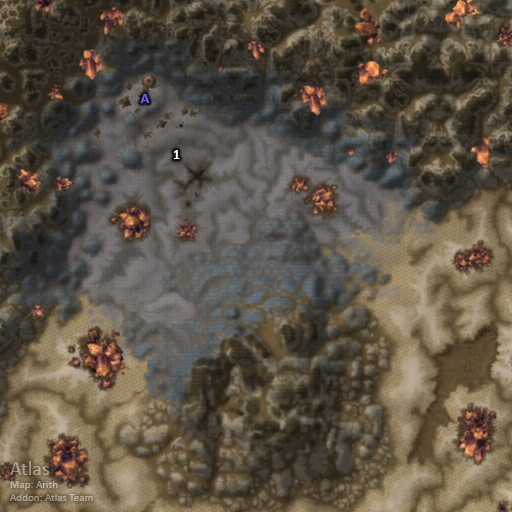
<style>
.page{position:relative;width:512px;height:512px}
.page>*{position:absolute;margin:0}
.t1{font:14px "Calibri-Bold";color:#6666ff}
.t2{font:14px "Calibri-Bold";color:#ffffff}
.t3{font:11px "Calibri";color:#b0a695}
.t4{font:20px "Calibri";color:#b0a695}
</style>
<div class="page">
<p class="t1" style="left:140px;top:94px;width:9px;height:9px">A</p>
<p class="t2" style="left:173px;top:150px;width:7px;height:9px">1</p>
<p class="t3" style="left:10px;top:461px;width:83px;height:40px"><span class="t4">Atlas<br></span>Map: Arith<br>Addon: Atlas Team</p>
</div>
